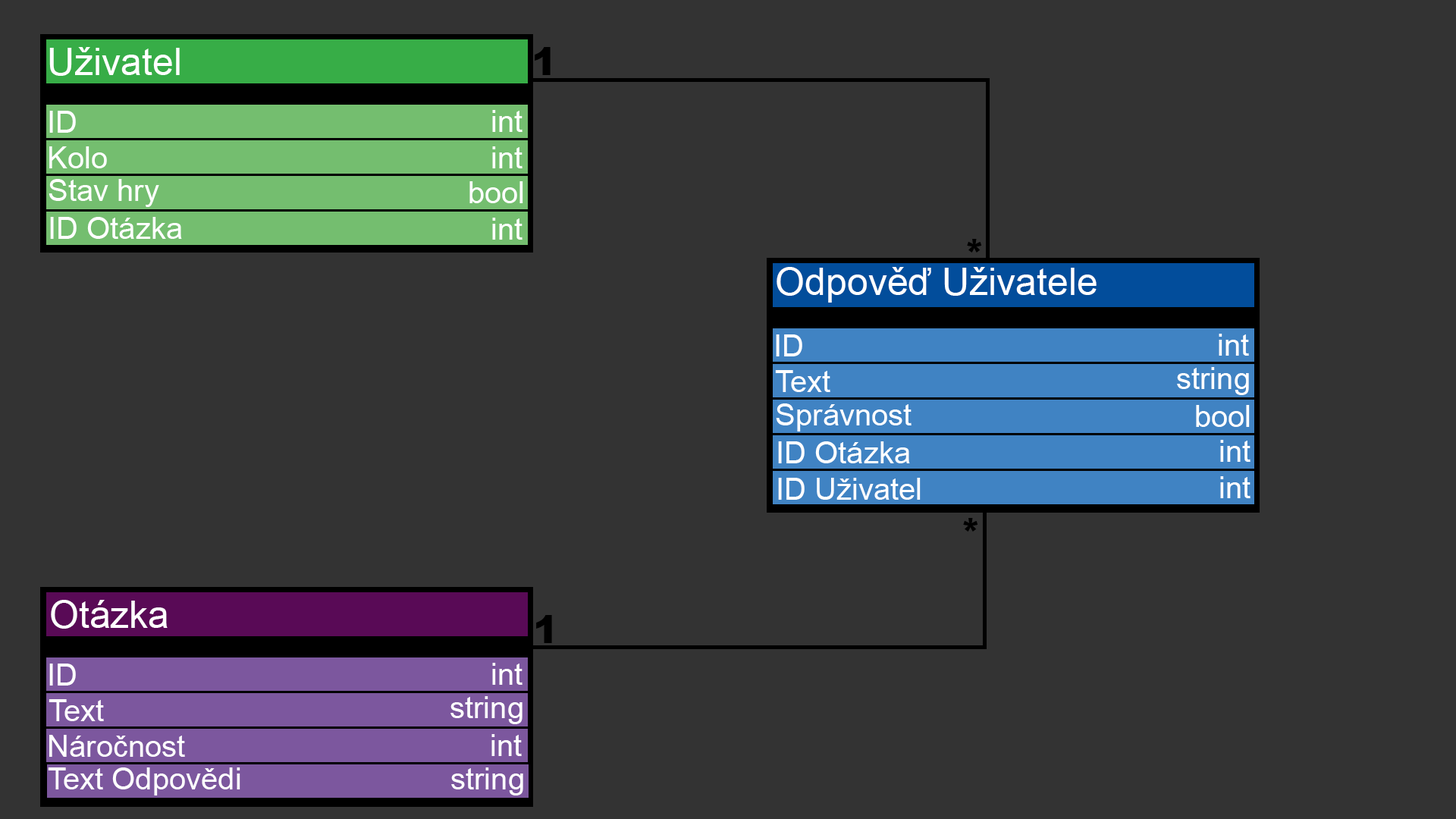
<style>
.page{position:relative;width:1456px;height:819px;background:#333333}
.page>*{position:absolute;margin:0}
.t1{font:37.9px "ArialMT";color:#ffffff}
.t2{font:37.9px "Arial-Black";color:#000000}
.t3{font:30.3px "ArialMT";color:#ffffff}
</style>
<div class="page">
<p class="t1" style="left:49px;top:47px;width:131px;height:29px">Uživatel</p>
<p class="t2" style="left:535px;top:47px;width:16px;height:28px">1</p>
<p class="t3" style="left:49px;top:111px;width:27px;height:22px">ID</p>
<p class="t3" style="left:492px;top:110px;width:30px;height:22px">int</p>
<p class="t3" style="left:49px;top:146px;width:58px;height:22px">Kolo</p>
<p class="t3" style="left:492px;top:146px;width:30px;height:22px">int</p>
<p class="t3" style="left:49px;top:179px;width:110px;height:28px">Stav hry</p>
<p class="t3" style="left:469px;top:181px;width:54px;height:22px">bool</p>
<p class="t3" style="left:50px;top:217px;width:132px;height:22px">ID Otázka</p>
<p class="t3" style="left:492px;top:218px;width:30px;height:22px">int</p>
<p class="t2" style="left:967px;top:239px;width:15px;height:14px">*</p>
<p class="t1" style="left:777px;top:267px;width:320px;height:36px">Odpověď Uživatele</p>
<p class="t3" style="left:776px;top:334px;width:26px;height:22px">ID</p>
<p class="t3" style="left:1219px;top:334px;width:30px;height:22px">int</p>
<p class="t3" style="left:775px;top:370px;width:55px;height:22px">Text</p>
<p class="t3" style="left:1177px;top:367px;width:72px;height:28px">string</p>
<p class="t3" style="left:776px;top:403px;width:136px;height:28px">Správnost</p>
<p class="t3" style="left:1196px;top:405px;width:54px;height:22px">bool</p>
<p class="t3" style="left:778px;top:441px;width:143px;height:59px">ID Otázka<br>ID Uživatel</p>
<p class="t3" style="left:1220px;top:440px;width:30px;height:58px">int<br>int</p>
<p class="t2" style="left:963px;top:518px;width:15px;height:14px">*</p>
<p class="t1" style="left:51px;top:600px;width:117px;height:29px">Otázka</p>
<p class="t2" style="left:536px;top:615px;width:16px;height:28px">1</p>
<p class="t3" style="left:49px;top:664px;width:27px;height:22px">ID</p>
<p class="t3" style="left:492px;top:663px;width:30px;height:22px">int</p>
<p class="t3" style="left:49px;top:699px;width:55px;height:22px">Text</p>
<p class="t3" style="left:450px;top:696px;width:72px;height:28px">string</p>
<p class="t3" style="left:49px;top:735px;width:136px;height:22px">Náročnost</p>
<p class="t3" style="left:491px;top:734px;width:31px;height:22px">int</p>
<p class="t3" style="left:48px;top:767px;width:192px;height:28px">Text Odpovědi</p>
<p class="t3" style="left:451px;top:767px;width:72px;height:28px">string</p>
</div>
